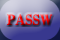
<style>
.page{position:relative;width:60px;height:40px}
.page>*{position:absolute;margin:0}
.t1{font:14px "MyungjoXB-HM"}
</style>
<div class="page">
<p class="t1" style="left:7px;top:14px;width:46px;height:11px">PASSW</p>
</div>
